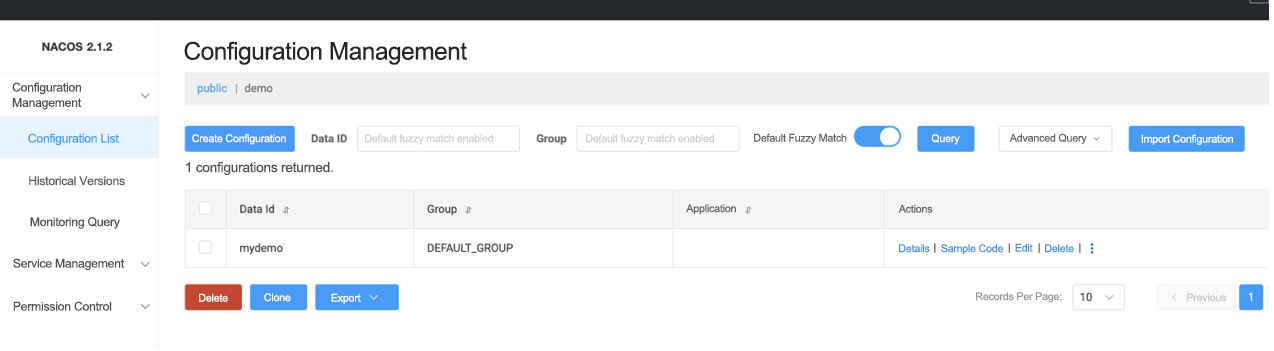
<style>
.page{position:relative;width:1274px;height:351px;background:#ffffff}
.page>*{position:absolute;margin:0}
.t1{font:24.4px "ArialMT";letter-spacing:-0.02em;color:#262626}
.t2{font:12.2px/15.3px "ArialMT";letter-spacing:-0.02em;color:#515151}
.t3{font:12.2px "ArialMT";letter-spacing:-0.02em;color:#449ded}
.t4{font:10.7px "ArialMT";letter-spacing:-0.02em;color:#fefefe}
.t5{font:10.7px "ArialMT";letter-spacing:-0.02em;color:#cfcfcf}
.t6{font:10.7px "ArialMT";letter-spacing:-0.02em;color:#616161}
.t7{font:13.8px "ArialMT";letter-spacing:-0.02em;color:#515151}
.t8{font:12.2px "ArialMT";letter-spacing:-0.02em;color:#605f5f}
.t9{font:12.2px "ArialMT";letter-spacing:-0.02em;color:#515151}
.t10{font:10.7px "ArialMT";letter-spacing:-0.02em;color:#4190da}
.t11{font:10.7px "ArialMT";letter-spacing:-0.02em;color:#979797}
.t12{font:10.7px "ArialMT";letter-spacing:-0.02em;color:#c8c8c8}
</style>
<div class="page">
<p class="t1" style="left:184px;top:41px;width:283px;height:24px">Configuration Management</p>
<p class="t2" style="left:12px;top:82px;width:70px;height:28px">Configuration <br>Management</p>
<p class="t3" style="left:28px;top:133px;width:91px;height:13px">Configuration List</p>
<p class="t4" style="left:192px;top:134px;width:94px;height:11px">Create Configuration</p>
<p class="t5" style="left:365px;top:134px;width:128px;height:11px">Default fuzzy match enabled</p>
<p class="t5" style="left:586px;top:134px;width:128px;height:11px">Default fuzzy match enabled</p>
<p class="t6" style="left:754px;top:133px;width:93px;height:11px">Default Fuzzy Match</p>
<p class="t4" style="left:931px;top:134px;width:29px;height:11px">Query</p>
<p class="t6" style="left:1009px;top:133px;width:78px;height:11px">Advanced Query</p>
<p class="t4" style="left:1141px;top:134px;width:92px;height:11px">Import Configuration</p>
<p class="t7" style="left:186px;top:162px;width:147px;height:13px">1 configurations returned.</p>
<p class="t8" style="left:29px;top:176px;width:96px;height:10px">Historical Versions</p>
<p class="t6" style="left:686px;top:204px;width:50px;height:11px">Application</p>
<p class="t6" style="left:898px;top:204px;width:35px;height:9px">Actions</p>
<p class="t9" style="left:30px;top:217px;width:90px;height:12px">Monitoring Query</p>
<p class="t10" style="left:899px;top:244px;width:31px;height:9px">Details</p>
<p class="t10" style="left:941px;top:244px;width:63px;height:11px">Sample Code</p>
<p class="t10" style="left:1015px;top:243px;width:18px;height:9px">Edit</p>
<p class="t10" style="left:1045px;top:244px;width:29px;height:9px">Delete</p>
<p class="t9" style="left:13px;top:258px;width:112px;height:13px">Service Management</p>
<p class="t4" style="left:199px;top:293px;width:29px;height:9px">Delete</p>
<p class="t4" style="left:264px;top:293px;width:27px;height:9px">Clone</p>
<p class="t4" style="left:331px;top:293px;width:30px;height:11px">Export</p>
<p class="t11" style="left:976px;top:292px;width:86px;height:11px">Records Per Page:</p>
<p class="t12" style="left:1187px;top:293px;width:40px;height:9px">Previous</p>
<p class="t9" style="left:13px;top:301px;width:99px;height:10px">Permission Control</p>
</div>
